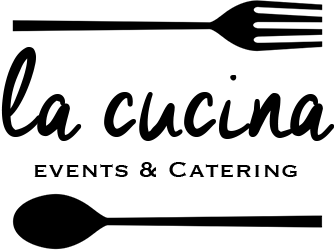
<style>
.page{position:relative;width:334px;height:250px;background:#ffffff}
.page>*{position:absolute;margin:0}
.t1{font:28.2px/39.8px "Copperplate";letter-spacing:0.01em;color:#000000}
.t2{font:148.2px/92.4px "CheddarJack";letter-spacing:0.01em;color:#000000}
</style>
<div class="page">
<p class="t1" style="left:1px;top:47px;width:334px;height:130px;text-align:center"><span class="t2">la cucina<br></span>events &amp; Catering</p>
</div>
